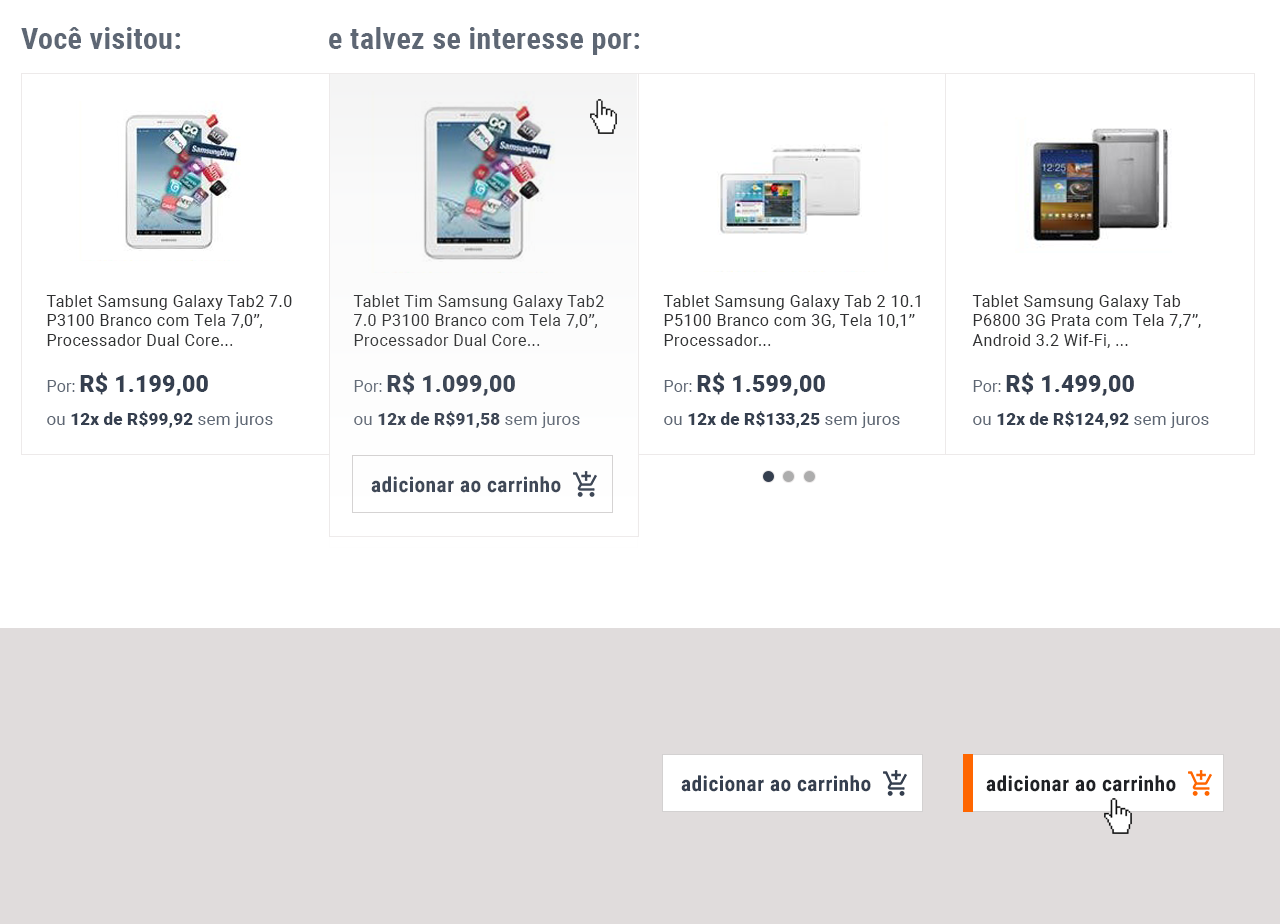
<style>
.page{position:relative;width:1280px;height:924px;background:#ffffff}
.page>*{position:absolute;margin:0}
.t1{font:29px "RobotoCondensed-Bold";letter-spacing:0.02em;color:#5e6774}
.t2{font:16px "Roboto-Regular";letter-spacing:0.02em;color:#303132}
.t3{font:16px "Roboto-Regular";color:#5e6774}
.t4{font:23px "Roboto-Black";color:#353f4f}
.t5{font:17px/33px "Roboto-Regular";color:#5e6774}
.t6{font:17px/33px "Roboto-Black";color:#353f4f}
.t7{font:21px "RobotoCondensed-Bold";letter-spacing:0.02em;color:#353f4f}
.t8{font:21px "RobotoCondensed-Bold";letter-spacing:0.02em;color:#1f2125}
</style>
<div class="page">
<p class="t1" style="left:21px;top:27px;width:160px;height:22px">Você visitou:</p>
<p class="t1" style="left:329px;top:27px;width:311px;height:28px">e talvez se interesse por:</p>
<p class="t2" style="left:46px;top:295px;width:246px;height:133px">Tablet Samsung Galaxy Tab2 7.0 <br>P3100 Branco com Tela 7,0”, <br>Processador Dual Core...<br><br><span class="t3">Por: </span><span class="t4">R$ 1.199,00<br></span><span class="t5">ou </span><span class="t6">12x de R$99,92 </span><span class="t5">sem juros</span></p>
<p class="t2" style="left:353px;top:295px;width:251px;height:133px">Tablet Tim Samsung Galaxy Tab2 <br>7.0 P3100 Branco com Tela 7,0”, <br>Processador Dual Core...<br><br><span class="t3">Por: </span><span class="t4">R$ 1.099,00<br></span><span class="t5">ou </span><span class="t6">12x de R$91,58 </span><span class="t5">sem juros</span></p>
<p class="t2" style="left:663px;top:295px;width:257px;height:133px">Tablet Samsung Galaxy Tab 2 10.1 <br>P5100 Branco com 3G, Tela 10,1” <br>Processador...<br><br><span class="t3">Por: </span><span class="t4">R$ 1.599,00<br></span><span class="t5">ou </span><span class="t6">12x de R$133,25 </span><span class="t5">sem juros</span></p>
<p class="t2" style="left:972px;top:295px;width:237px;height:133px">Tablet Samsung Galaxy Tab  <br>P6800 3G Prata com Tela 7,7”, <br>Android 3.2 Wif-Fi, ...<br><br><span class="t3">Por: </span><span class="t4">R$ 1.499,00<br></span><span class="t5">ou </span><span class="t6">12x de R$124,92 </span><span class="t5">sem juros</span></p>
<p class="t7" style="left:371px;top:476px;width:190px;height:17px">adicionar ao carrinho</p>
<p class="t7" style="left:681px;top:775px;width:190px;height:17px">adicionar ao carrinho</p>
<p class="t8" style="left:986px;top:775px;width:190px;height:17px">adicionar ao carrinho</p>
</div>
